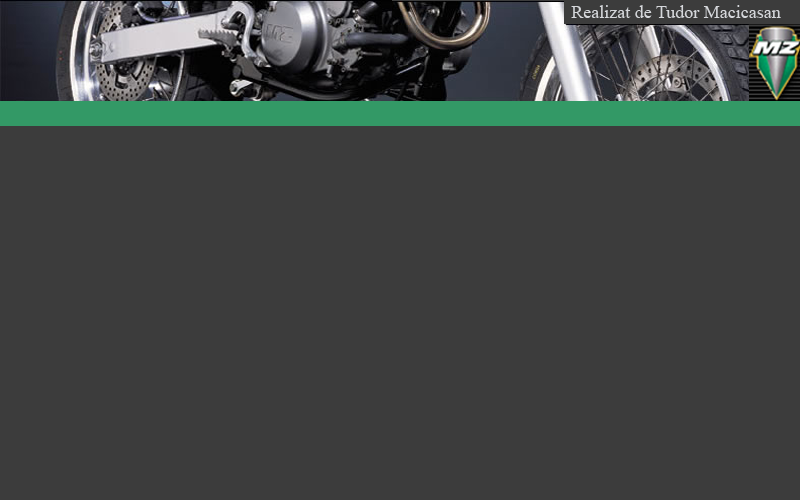
<style>
.page{position:relative;width:800px;height:500px;background:#3c3c3c}
.page>*{position:absolute;margin:0}
.t1{font:18px "TimesNewRomanPSMT";color:#d5d7db}
</style>
<div class="page">
<p class="t1" style="left:571px;top:5px;width:210px;height:13px">Realizat de Tudor Macicasan</p>
</div>
